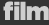
<style>
.page{position:relative;width:49px;height:25px;background:#333333}
.page>*{position:absolute;margin:0}
.t1{font:25px "GothamBlack";letter-spacing:-0.05em;color:#cfcfcf}
</style>
<div class="page">
<p class="t1" style="left:3px;top:1px;width:46px;height:19px">film</p>
</div>
